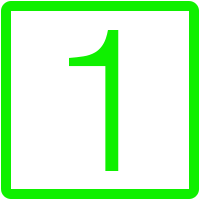
<style>
.page{position:relative;width:200px;height:200px;background:#ffffff}
.page>*{position:absolute;margin:0}
.t1{font:200px "Helvetica-Light";color:#0ff000}
</style>
<div class="page">
<p class="t1" style="left:69px;top:30px;width:50px;height:141px">1</p>
</div>
